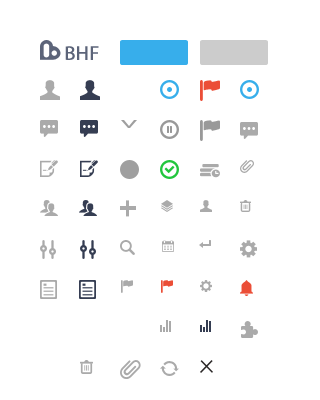
<style>
.page{position:relative;width:320px;height:400px;background:#ffffff}
.page>*{position:absolute;margin:0}
.t1{font:20px "MyriadPro-Regular";color:#5c6479;font-weight:bold}
</style>
<div class="page">
<p class="t1" style="left:65px;top:46px;width:34px;height:14px">BHF</p>
</div>
